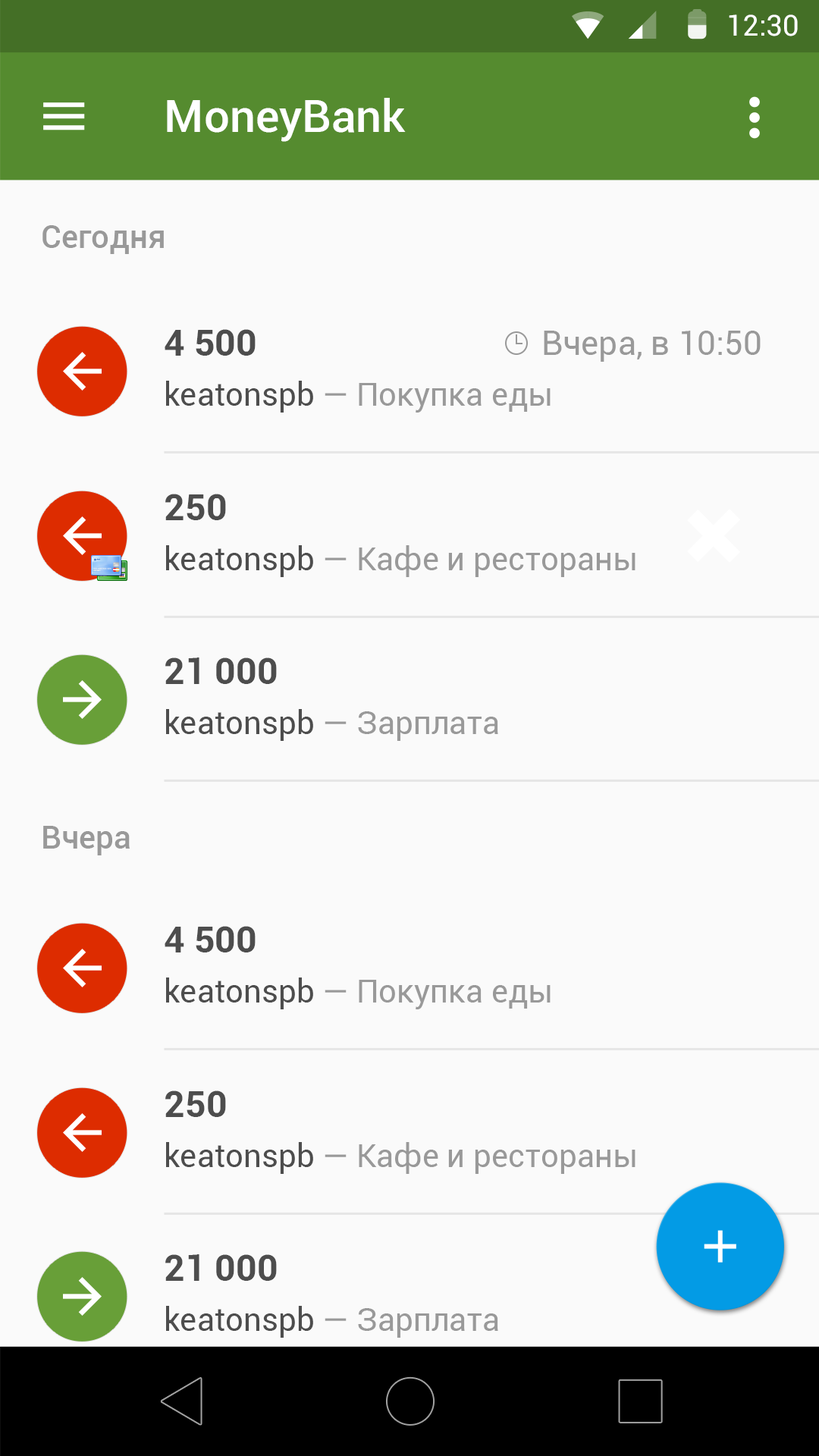
<style>
.page{position:relative;width:819px;height:1456px;background:#fafafa}
.page>*{position:absolute;margin:0}
.t1{font:28.9px "Roboto-Regular";color:#ffffff}
.t2{font:45.6px "Roboto-Medium";color:#ffffff}
.t3{font:31.9px "Roboto-Medium";color:#999999}
.t4{font:36.5px "Roboto-Bold";color:#4d4d4d}
.t5{font:33.7px "Roboto-Regular";color:#999999}
.t6{font:31.9px "Roboto-Regular";color:#999999}
.t7{font:31.9px "Roboto-Regular";color:#4d4d4d}
</style>
<div class="page">
<p class="t1" style="left:729px;top:14px;width:69px;height:22px">12:30</p>
<p class="t2" style="left:167px;top:98px;width:239px;height:44px">MoneyBank</p>
<p class="t3" style="left:42px;top:225px;width:122px;height:29px">Сегодня</p>
<p class="t4" style="left:165px;top:329px;width:91px;height:27px">4 500</p>
<p class="t5" style="left:544px;top:331px;width:217px;height:31px">Вчера, в 10:50</p>
<p class="t6" style="left:166px;top:381px;width:385px;height:32px"><span class="t7">keatonspb</span> — Покупка еды</p>
<p class="t4" style="left:165px;top:494px;width:61px;height:26px">250</p>
<p class="t6" style="left:166px;top:545px;width:469px;height:32px"><span class="t7">keatonspb</span> — Кафе и рестораны</p>
<p class="t4" style="left:165px;top:657px;width:112px;height:27px">21 000</p>
<p class="t6" style="left:166px;top:709px;width:332px;height:32px"><span class="t7">keatonspb</span> — Зарплата</p>
<p class="t3" style="left:43px;top:826px;width:87px;height:29px">Вчера</p>
<p class="t4" style="left:165px;top:926px;width:91px;height:26px">4 500</p>
<p class="t6" style="left:166px;top:977px;width:385px;height:32px"><span class="t7">keatonspb</span> — Покупка еды</p>
<p class="t4" style="left:165px;top:1090px;width:61px;height:27px">250</p>
<p class="t6" style="left:166px;top:1142px;width:469px;height:32px"><span class="t7">keatonspb</span> — Кафе и рестораны</p>
<p class="t4" style="left:165px;top:1254px;width:112px;height:27px">21 000</p>
<p class="t6" style="left:166px;top:1306px;width:332px;height:32px"><span class="t7">keatonspb</span> — Зарплата</p>
</div>
